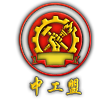
<style>
.page{position:relative;width:110px;height:100px;background:#ffffff}
.page>*{position:absolute;margin:0}
.t1{font:18.7px "STXingkai"}
</style>
<div class="page">
<p class="t1" style="left:30px;top:77px;width:51px;height:19px">中工盟</p>
</div>
